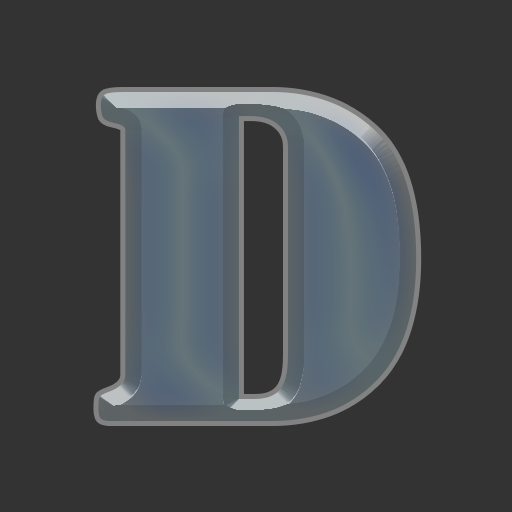
<style>
.page{position:relative;width:512px;height:512px;background:#333333}
.page>*{position:absolute;margin:0}
.t1{font:416.7px "BernardMT-Condensed";color:#5a6978;scale:1.5 1}
</style>
<div class="page">
<p class="t1" style="left:98px;top:92px;width:319px;height:329px">D</p>
</div>
